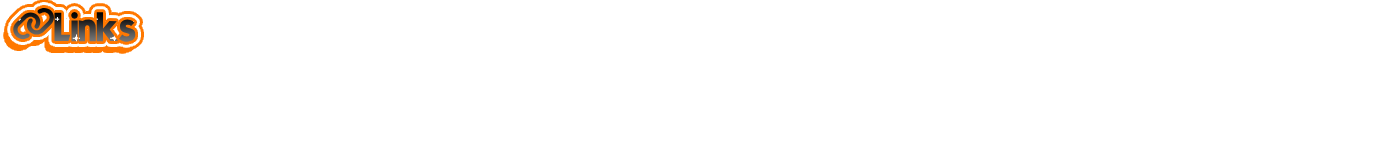
<style>
.page{position:relative;width:1386px;height:155px;background:#ffffff}
.page>*{position:absolute;margin:0}
.t1{font:40px "Mouser"}
</style>
<div class="page">
<p class="t1" style="left:54px;top:12px;width:82px;height:30px">Links</p>
</div>
